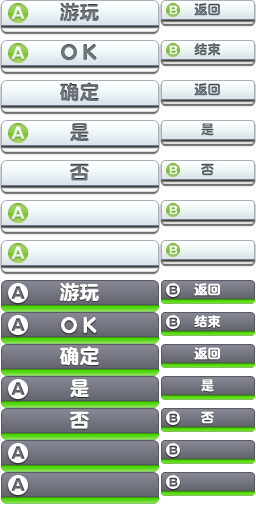
<style>
.page{position:relative;width:256px;height:512px;background:#ffffff}
.page>*{position:absolute;margin:0}
.t1{font:20px "DFPYuanW9";color:#6e737b}
.t2{font:13.3px "DFPYuanW9";color:#6e737b}
.t3{font:13.3px "DFPYuanW9"}
.t4{font:20px "DFPYuanW9";color:#ffffff}
.t5{font:13.3px "DFPYuanW9";color:#ffffff}
</style>
<div class="page">
<p class="t1" style="left:60px;top:2px;width:39px;height:20px">游玩</p>
<p class="t2" style="left:194px;top:3px;width:26px;height:13px">返回</p>
<p class="t2" style="left:194px;top:43px;width:27px;height:13px">结束</p>
<p class="t1" style="left:60px;top:82px;width:39px;height:20px">确定</p>
<p class="t2" style="left:194px;top:83px;width:26px;height:13px">返回</p>
<p class="t1" style="left:70px;top:123px;width:19px;height:19px">是</p>
<p class="t3" style="left:201px;top:123px;width:13px;height:13px">是</p>
<p class="t1" style="left:70px;top:163px;width:19px;height:18px">否</p>
<p class="t2" style="left:201px;top:163px;width:13px;height:13px">否</p>
<p class="t4" style="left:60px;top:282px;width:39px;height:20px">游玩</p>
<p class="t5" style="left:194px;top:283px;width:26px;height:13px">返回</p>
<p class="t5" style="left:194px;top:315px;width:27px;height:13px">结束</p>
<p class="t4" style="left:60px;top:346px;width:39px;height:20px">确定</p>
<p class="t5" style="left:194px;top:347px;width:26px;height:13px">返回</p>
<p class="t4" style="left:70px;top:379px;width:19px;height:19px">是</p>
<p class="t5" style="left:201px;top:379px;width:13px;height:13px">是</p>
<p class="t4" style="left:70px;top:411px;width:19px;height:18px">否</p>
<p class="t5" style="left:201px;top:411px;width:13px;height:13px">否</p>
</div>
